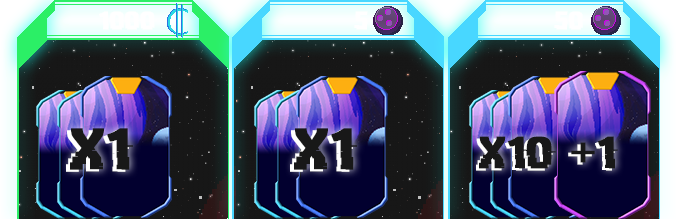
<style>
.page{position:relative;width:676px;height:219px}
.page>*{position:absolute;margin:0}
.t1{font:25px "HACKED";color:#ffffff;font-weight:bold;scale:1.19 1}
.t2{font:58.2px "HACKED";color:#181818;font-weight:bold;scale:1.19 1}
.t3{font:45px "HACKED";color:#181818;font-weight:bold;scale:1.19 1}
.t4{font:45px "HACKED";font-weight:bold;scale:1.19 1}
</style>
<div class="page">
<p class="t1" style="left:99px;top:11px;width:58px;height:19px">1000</p>
<p class="t1" style="left:354px;top:11px;width:14px;height:19px">5</p>
<p class="t1" style="left:554px;top:11px;width:32px;height:19px">50</p>
<p class="t2" style="left:70px;top:128px;width:63px;height:42px">x1</p>
<p class="t2" style="left:294px;top:128px;width:63px;height:42px">x1</p>
<p class="t3" style="left:479px;top:136px;width:139px;height:33px">x10 +1</p>
<p class="t4" style="left:476px;top:138px;width:139px;height:33px">x10 +1</p>
</div>
